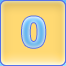
<style>
.page{position:relative;width:66px;height:66px}
.page>*{position:absolute;margin:0}
.t1{font:41px "Tahoma-Bold"}
</style>
<div class="page">
<p class="t1" style="left:22px;top:16px;width:24px;height:32px">0</p>
<p class="t1" style="left:22px;top:16px;width:24px;height:32px">0</p>
</div>
